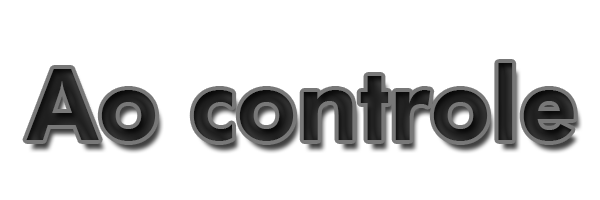
<style>
.page{position:relative;width:600px;height:200px;background:#ffffff}
.page>*{position:absolute;margin:0}
.t1{font:100px "FuturaBT-Heavy";color:#202020}
</style>
<div class="page">
<p class="t1" style="left:26px;top:63px;width:548px;height:78px">Ao controle</p>
</div>
